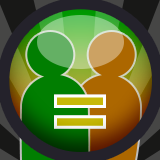
<style>
.page{position:relative;width:160px;height:160px}
.page>*{position:absolute;margin:0}
.t1{font:110.3px "Impact"}
</style>
<div class="page">
<p class="t1" style="left:54px;top:94px;width:52px;height:35px">=</p>
</div>
